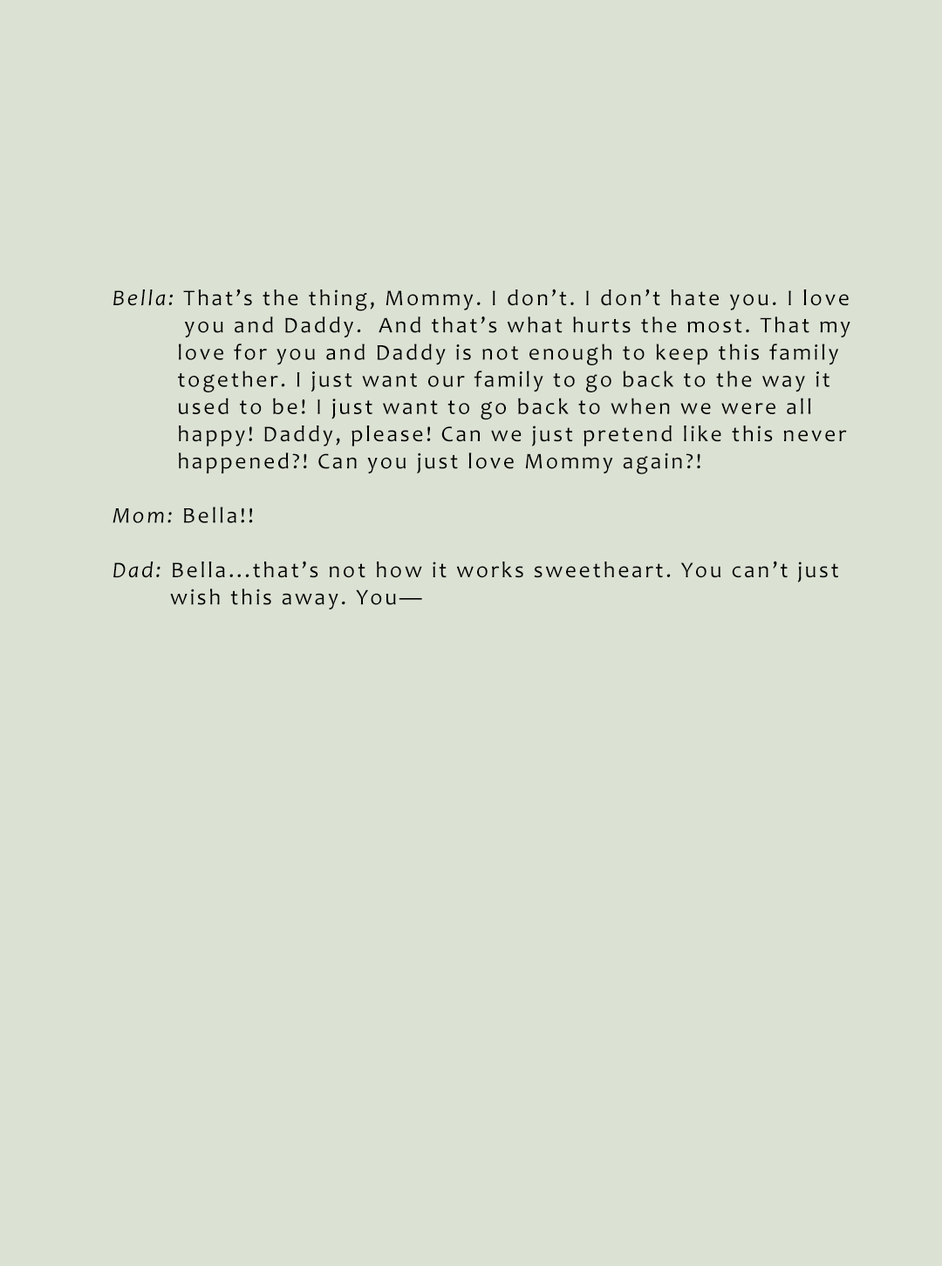
<style>
.page{position:relative;width:942px;height:1266px;background:#dbe1d3}
.page>*{position:absolute;margin:0}
.t1{font:22.7px "Candara";letter-spacing:0.1em;color:#000000}
.t2{font:22.7px "Candara-Italic";letter-spacing:0.1em;color:#000000}
</style>
<div class="page">
<p class="t1" style="left:112px;top:289px;width:738px;height:321px"><span class="t2">Bella: </span>That’s the thing, Mommy. I don’t. I don’t hate you. I love <br>          you and Daddy.  And that’s what hurts the most. That my<br>         love for you and Daddy is not enough to keep this family <br>         together. I just want our family to go back to the way it <br>         used to be! I just want to go back to when we were all <br>         happy! Daddy, please! Can we just pretend like this never <br>         happened?! Can you just love Mommy again?!<br><span class="t2"><br>Mom: </span>Bella!!<br><span class="t2"><br>Dad: </span>Bella...that’s not how it works sweetheart. You can’t just <br>        wish this away. You—</p>
</div>
